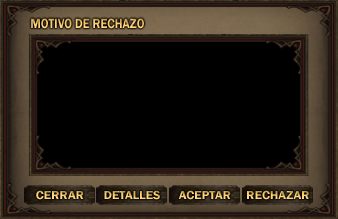
<style>
.page{position:relative;width:338px;height:219px;background:#000000}
.page>*{position:absolute;margin:0}
.t1{font:14px "FranklinGothic-Demi";scale:0.86 1}
.t2{font:12px "FranklinGothic-Demi";scale:1.07 1}
</style>
<div class="page">
<p class="t1" style="left:31px;top:18px;width:113px;height:11px">MOTIVO DE RECHAZO</p>
<p class="t2" style="left:36px;top:190px;width:48px;height:10px">CERRAR</p>
<p class="t2" style="left:104px;top:190px;width:56px;height:10px">DETALLES</p>
<p class="t2" style="left:178px;top:190px;width:53px;height:10px">ACEPTAR</p>
<p class="t2" style="left:247px;top:190px;width:62px;height:10px">RECHAZAR</p>
</div>
